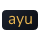
<style>
.page{position:relative;width:40px;height:40px;background:#ffffff}
.page>*{position:absolute;margin:0}
.t1{font:16.5px "Nunito-Regular";color:#e6b450;scale:0.94 1}
</style>
<div class="page">
<p class="t1" style="left:8px;top:15px;width:24px;height:12px">ayu</p>
</div>
